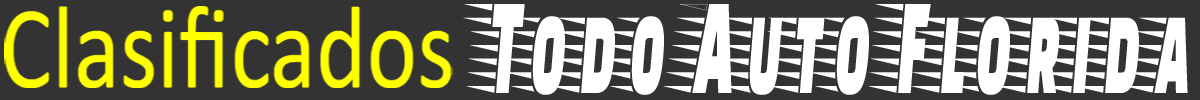
<style>
.page{position:relative;width:1200px;height:100px;background:#333333}
.page>*{position:absolute;margin:0}
.t1{font:119.1px "Calibri";color:#ffff00;scale:0.81 1}
.t2{font:142.2px "FasterOne-Regular";color:#ffffff;scale:0.46 1}
</style>
<div class="page">
<p class="t1" style="left:4px;top:6px;width:449px;height:82px">Clasificados</p>
<p class="t2" style="left:463px;top:4px;width:725px;height:91px">Todo Auto Florida</p>
</div>
